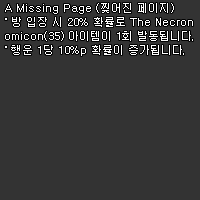
<style>
.page{position:relative;width:200px;height:200px;background:#333333}
.page>*{position:absolute;margin:0}
.t1{font:11px/14px "Dotum";color:#ffffff}
</style>
<div class="page">
<p class="t1" style="left:5px;top:3px;width:188px;height:53px">A Missing Page (찢어진 페이지)<br>˚ 방 입장 시 20% 확률로 The Necron<br>omicon(35) 아이템이 1회 발동됩니다.<br>˚ 행운 1당 10%p 확률이 증가됩니다.</p>
</div>
